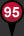
<style>
.page{position:relative;width:24px;height:36px;background:#333333}
.page>*{position:absolute;margin:0}
.t1{font:14.3px "Arial-BoldMT";color:#ffffff}
</style>
<div class="page">
<p class="t1" style="left:4px;top:6px;width:16px;height:12px">95</p>
</div>
